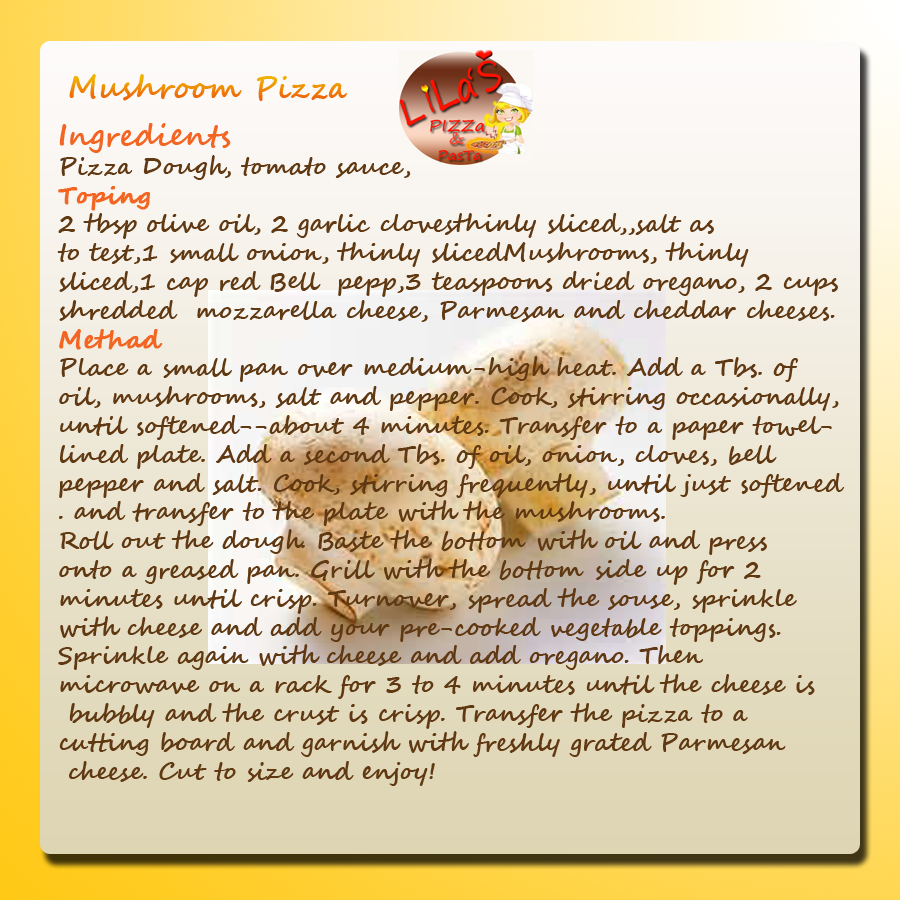
<style>
.page{position:relative;width:900px;height:900px}
.page>*{position:absolute;margin:0}
.t1{font:30px "SegoeScript-Bold"}
.t2{font:24px "SegoeScript-Bold";color:#603913}
.t3{font:30px "SegoeScript-Bold";color:#f26522}
.t4{font:24px "SegoeScript-Bold";color:#f26522;font-weight:bold}
</style>
<div class="page">
<p class="t1" style="left:69px;top:74px;width:278px;height:27px">Mushroom Pizza</p>
<p class="t2" style="left:57px;top:123px;width:787px;height:663px"><span class="t3">Ingredients<br></span>Pizza Dough, tomato sauce,<br><span class="t4">Toping<br></span>2 tbsp olive oil, 2 garlic clovesthinly sliced,,salt as <br>to test,1 small onion, thinly slicedMushrooms, thinly<br>sliced,1 cap red Bell  pepp,3 teaspoons dried oregano, 2 cups<br>shredded  mozzarella cheese, Parmesan and cheddar cheeses. <br><span class="t4">Methad<br></span>Place a small pan over medium-high heat. Add a Tbs. of <br>oil, mushrooms, salt and pepper. Cook, stirring occasionally, <br>until softened--about 4 minutes. Transfer to a paper towel-<br>lined plate. Add a second Tbs. of oil, onion, cloves, bell <br>pepper and salt. Cook, stirring frequently, until just softened<br>. and transfer to the plate with the mushrooms.<br>Roll out the dough. Baste the bottom with oil and press <br>onto a greased pan. Grill with the bottom side up for 2 <br>minutes until crisp. Turnover, spread the souse, sprinkle <br>with cheese and add your pre-cooked vegetable toppings. <br>Sprinkle again with cheese and add oregano. Then <br>microwave on a rack for 3 to 4 minutes until the cheese is<br> bubbly and the crust is crisp. Transfer the pizza to a <br>cutting board and garnish with freshly grated Parmesan<br> cheese. Cut to size and enjoy!</p>
</div>
